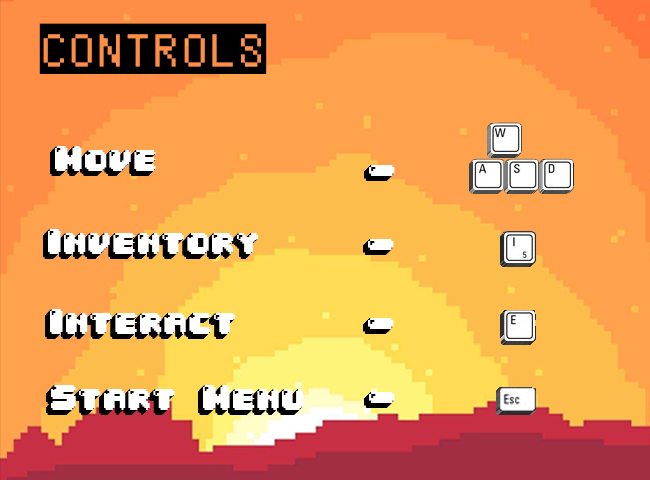
<style>
.page{position:relative;width:650px;height:480px;background:#fea24d}
.page>*{position:absolute;margin:0}
.t1{font:72px "Pixeland";color:#000000}
.t2{font:30px "04b30";color:#ffffff}
</style>
<div class="page">
<p class="t1" style="left:39px;top:23px;width:228px;height:51px">CONTROLS</p>
<p class="t2" style="left:48px;top:229px;width:211px;height:25px">Inventory</p>
<p class="t2" style="left:50px;top:309px;width:186px;height:25px">Interact</p>
<p class="t2" style="left:51px;top:385px;width:253px;height:25px">Start Menu</p>
</div>
